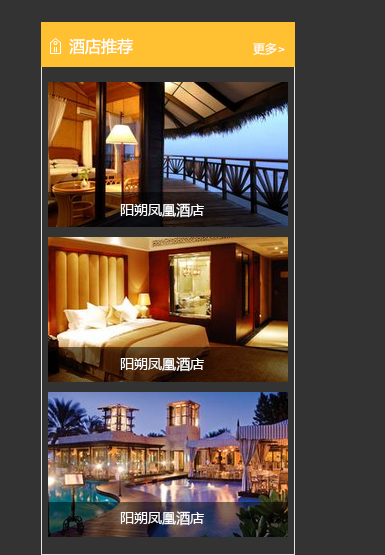
<style>
.page{position:relative;width:385px;height:555px;background:#333333}
.page>*{position:absolute;margin:0}
.t1{font:16px "MicrosoftYaHei";color:#ffffff}
.t2{font:12px "MicrosoftYaHei";color:#ffffff}
.t3{font:14px "MicrosoftYaHei";color:#ffffff}
</style>
<div class="page">
<p class="t1" style="left:69px;top:38px;width:64px;height:17px">酒店推荐</p>
<p class="t2" style="left:253px;top:42px;width:32px;height:13px">更多&gt;</p>
<p class="t3" style="left:120px;top:203px;width:84px;height:15px">阳朔凤凰酒店</p>
<p class="t3" style="left:120px;top:357px;width:84px;height:15px">阳朔凤凰酒店</p>
<p class="t3" style="left:120px;top:511px;width:84px;height:15px">阳朔凤凰酒店</p>
</div>
